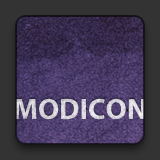
<style>
.page{position:relative;width:160px;height:160px;background:#333333}
.page>*{position:absolute;margin:0}
.t1{font:29.5px "Myriad-Bold";color:#d6d4db}
</style>
<div class="page">
<p class="t1" style="left:14px;top:98px;width:132px;height:22px">MODICON</p>
</div>
